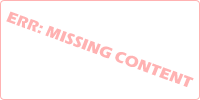
<style>
.page{position:relative;width:200px;height:100px;background:#ffffff}
.page>*{position:absolute;margin:0}
.t1{font:16px "ErasITC-Bold";color:#ffb2b2}
</style>
<div class="page">
<p class="t1" style="left:6px;top:11px;width:188px;height:76px;rotate:20deg">ERR: MISSING CONTENT</p>
</div>
